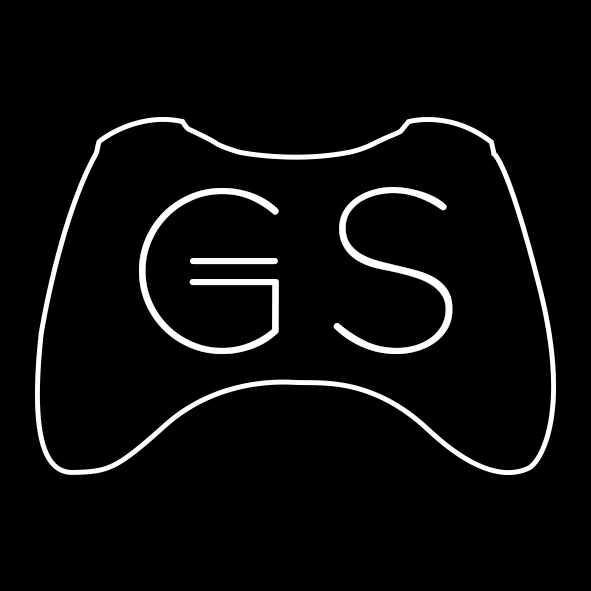
<style>
.page{position:relative;width:591px;height:591px;background:#000000}
.page>*{position:absolute;margin:0}
.t1{font:208.3px "Anders";letter-spacing:0.14em;color:#ffffff}
</style>
<div class="page">
<p class="t1" style="left:139px;top:187px;width:314px;height:167px">GS</p>
</div>
